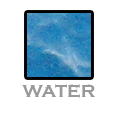
<style>
.page{position:relative;width:116px;height:116px;background:#ffffff}
.page>*{position:absolute;margin:0}
.t1{font:18px "CopperplateGothic-Bold";color:#999999}
</style>
<div class="page">
<p class="t1" style="left:22px;top:84px;width:73px;height:14px">WATER</p>
</div>
